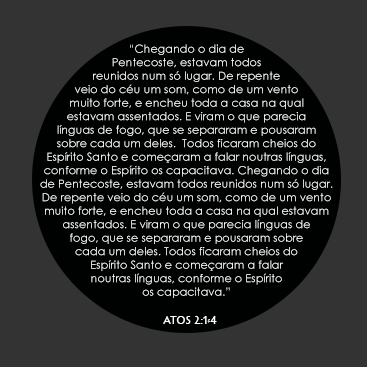
<style>
.page{position:relative;width:367px;height:367px;background:#333333}
.page>*{position:absolute;margin:0}
.t1{font:11.2px "CenturyGothic";color:#ffffff}
.t2{font:10.4px "Pericles";color:#ffffff}
</style>
<div class="page">
<p class="t1" style="left:40px;top:44px;width:293px;height:254px;text-align:center">“Chegando o dia de Pentecoste, estavam todos reunidos num só lugar. De repente veio do céu um som, como de um vento muito forte, e encheu toda a casa na qual estavam assentados. E viram o que parecia línguas de fogo, que se separaram e pousaram sobre cada um deles.  Todos ficaram cheios do Espírito Santo e começaram a falar noutras línguas, conforme o Espírito os capacitava. Chegando o dia de Pentecoste, estavam todos reunidos num só lugar. De repente veio do céu um som, como de um vento muito forte, e encheu toda a casa na qual estavam assentados. E viram o que parecia línguas de fogo, que se separaram e pousaram sobre cada um deles. Todos ficaram cheios do Espírito Santo e começaram a falar noutras línguas, conforme o Espírito os capacitava.”</p>
<p class="t2" style="left:163px;top:316px;width:54px;height:8px">ATOS 2:1-4</p>
</div>
